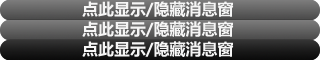
<style>
.page{position:relative;width:320px;height:60px}
.page>*{position:absolute;margin:0}
.t1{font:16px "MicrosoftYaHei-Bold";color:#f5f5f5}
</style>
<div class="page">
<p class="t1" style="left:82px;top:1px;width:152px;height:16px">点此显示/隐藏消息窗</p>
<p class="t1" style="left:82px;top:21px;width:152px;height:16px">点此显示/隐藏消息窗</p>
<p class="t1" style="left:82px;top:41px;width:152px;height:16px">点此显示/隐藏消息窗</p>
</div>
